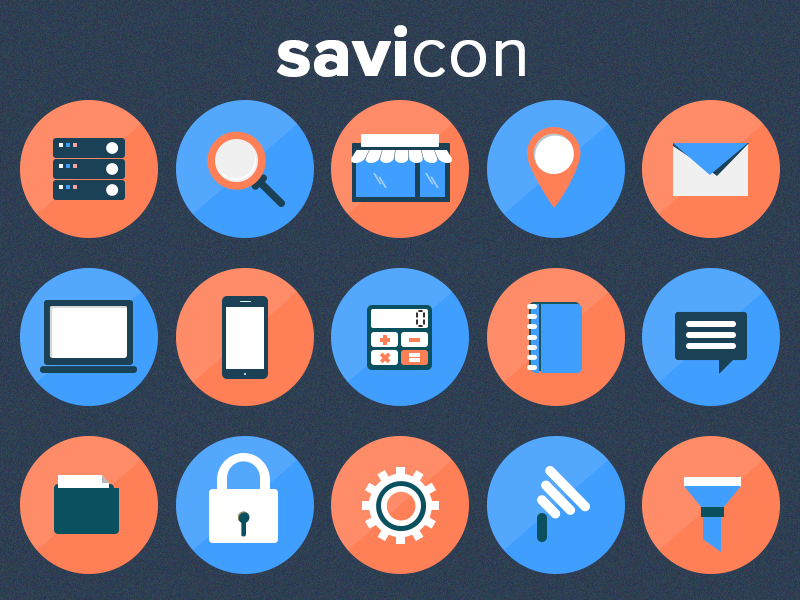
<style>
.page{position:relative;width:800px;height:600px}
.page>*{position:absolute;margin:0}
.t1{font:71px "ProximaNova-Bold";color:#ffffff;font-weight:bold}
.t2{font:71px "ProximaNova-Light";color:#ffffff;font-weight:bold}
</style>
<div class="page">
<p class="t1" style="left:277px;top:25px;width:248px;height:52px">savi<span class="t2">con</span></p>
</div>
